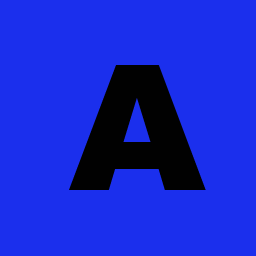
<style>
.page{position:relative;width:256px;height:256px;background:#1b2fed}
.page>*{position:absolute;margin:0}
.t1{font:174.7px "Arial-Black";color:#010101}
</style>
<div class="page">
<p class="t1" style="left:69px;top:65px;width:137px;height:125px">A</p>
</div>
